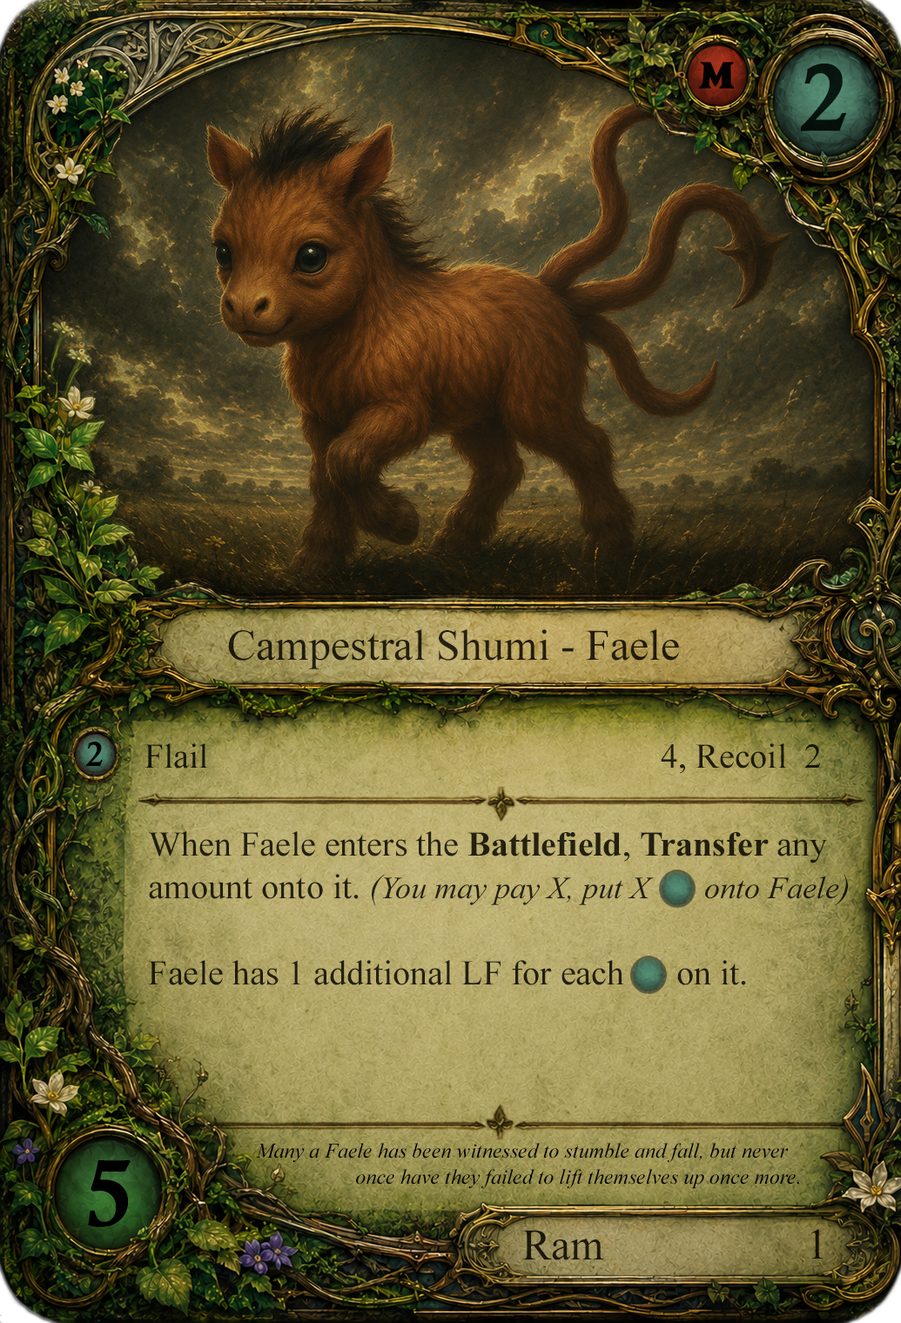
<style>
.page{position:relative;width:901px;height:1323px}
.page>*{position:absolute;margin:0}
.t1{font:95.8px "CalisMTBol";color:#000000}
.t2{font:43.5px "TimesNewRomanPSMT";color:#221d0d}
.t3{font:34.8px "CalisMTBol";color:#000000}
.t4{font:34.8px "TimesNewRomanPSMT";color:#1d1b0a}
.t5{font:34.8px/41.8px "TimesNewRomanPSMT";color:#231f10}
.t6{font:34.8px/41.8px "TimesNewRomanPS-BoldMT";color:#231f10}
.t7{font:34.8px/41.8px "TimesNewRomanPS-ItalicMT";color:#231f10}
.t8{font:31.3px/41.8px "TimesNewRomanPS-ItalicMT";color:#231f10}
.t9{font:20.9px/26.1px "TimesNewRomanPS-ItalicMT";color:#000000}
.t10{font:43.5px "TimesNewRomanPSMT";color:#000000}
.t11{font:43.5px "TimesNewRomanPSMT";color:#1c190c}
</style>
<div class="page">
<p class="t1" style="left:801px;top:64px;width:46px;height:67px;opacity:0.9">2</p>
<p class="t2" style="left:228px;top:629px;width:451px;height:41px">Campestral Shumi - Faele</p>
<p class="t3" style="left:86px;top:742px;width:17px;height:25px">2</p>
<p class="t4" style="left:145px;top:744px;width:676px;height:30px">Flail                                                    4, Recoil  2</p>
<p class="t5" style="left:148px;top:831px;width:700px;height:155px">When Faele enters the <span class="t6">Battlefield</span>, <span class="t6">Transfer </span>any <br>amount onto it. <span class="t7">(</span><span class="t8">You may pay X, put X       onto Faele</span><span class="t7">)<br><br></span>Faele has 1 additional LF for each      on it.</p>
<p class="t9" style="left:256px;top:1143px;width:543px;height:46px">Many a Faele has been witnessed to stumble and fall, but never<br>                   once have they failed to lift themselves up once more.</p>
<p class="t1" style="left:88px;top:1160px;width:43px;height:68px">5</p>
<p class="t10" style="left:811px;top:1229px;width:12px;height:30px;opacity:0.9">1</p>
<p class="t11" style="left:522px;top:1230px;width:81px;height:31px">Ram</p>
</div>
